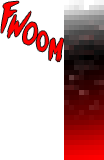
<style>
.page{position:relative;width:104px;height:160px;background:#ffffff}
.page>*{position:absolute;margin:0}
.t1{font:32.1px "outrunfuture";color:#ff0000;text-transform:uppercase;scale:0.72 1}
.t2{font:20.9px "outrunfuture";color:#ff0000;text-transform:uppercase;scale:1.05 1}
.t3{font:24.4px "outrunfuture";color:#ff0000;text-transform:uppercase;scale:0.57 1}
.t4{font:21.5px "outrunfuture";color:#ff0000;text-transform:uppercase;scale:0.56 1}
.t5{font:20.9px "outrunfuture";color:#ff0000;text-transform:uppercase;scale:0.85 1}
</style>
<div class="page">
<p class="t1" style="left:1px;top:1px;width:18px;height:32px">f</p>
<p class="t2" style="left:7px;top:11px;width:24px;height:27px;rotate:-13deg">w</p>
<p class="t3" style="left:23px;top:22px;width:15px;height:23px;rotate:6deg">o</p>
<p class="t4" style="left:36px;top:31px;width:13px;height:21px;rotate:-8deg">o</p>
<p class="t5" style="left:49px;top:38px;width:15px;height:24px;rotate:-1deg">m</p>
</div>
